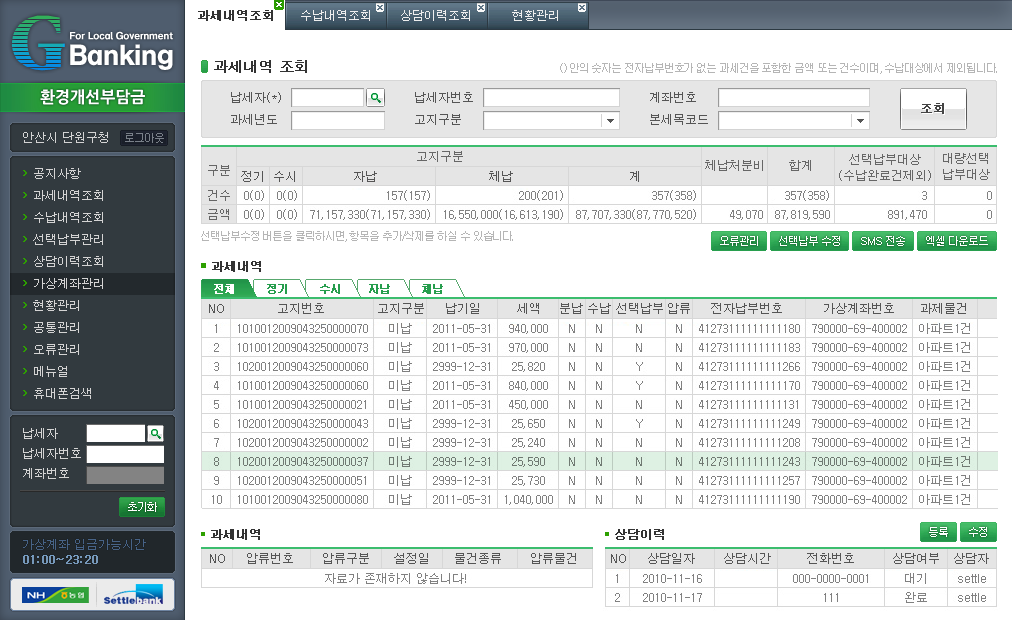
<style>
.page{position:relative;width:1012px;height:620px;background:#ffffff}
.page>*{position:absolute;margin:0}
.t1{font:12px "Dotum";color:#333333;font-weight:bold}
.t2{font:12px "Dotum";color:#eeeeee}
.t3{font:14px "Dotum";color:#333333;font-weight:bold}
.t4{font:11px "Dotum";letter-spacing:-0.1em;color:#b5b5b5}
.t5{font:16px "NanumGothicOTFExtraBold";color:#ffffff}
.t6{font:12px/22px "Dotum";color:#555555;text-transform:uppercase}
.t7{font:12px "Dotum";letter-spacing:-0.1em;color:#444444;font-weight:bold}
.t8{font:12px "Dotum";color:#d4d4d4}
.t9{font:12px "Dotum";color:#666666;text-transform:uppercase}
.t10{font:12px/16px "Dotum";color:#666666;text-transform:uppercase}
.t11{font:12px/22px "Dotum";color:#d5d4d4}
.t12{font:12px "Dotum";color:#555555;text-transform:uppercase}
.t13{font:11px "Dotum";letter-spacing:-0.1em;color:#feffff}
.t14{font:11px "Dotum";letter-spacing:-0.1em;color:#ffffff}
.t15{font:11px "Dotum";letter-spacing:-0.1em;color:#ffffff;font-weight:bold}
.t16{font:11px "Dotum";letter-spacing:-0.1em;color:#269d4d;font-weight:bold}
.t17{font:12px/20px "Dotum";color:#d4d4d4;text-transform:uppercase}
.t18{font:12px/15px "Dotum";text-transform:uppercase}
.t19{font:12px/15px "Dotum";text-transform:uppercase;font-weight:bold}
</style>
<div class="page">
<p class="t1" style="left:198px;top:10px;width:75px;height:11px">과세내역조회</p>
<p class="t2" style="left:301px;top:10px;width:257px;height:11px">수납내역조회       상담이력조회          현황관리</p>
<p class="t3" style="left:214px;top:60px;width:93px;height:13px">과세내역 조회</p>
<p class="t4" style="left:560px;top:63px;width:437px;height:11px">() 안의 숫자는 전자납부번호가 없는 과세건을 포함한 금액 또는 건수이며, 수납대상에서 제외됩니다.</p>
<p class="t5" style="left:40px;top:89px;width:105px;height:16px">환경개선부담금</p>
<p class="t6" style="left:231px;top:92px;width:50px;height:33px">납세자(*)<br>과세년도</p>
<p class="t6" style="left:415px;top:92px;width:58px;height:33px">납세자번호<br>고지구분</p>
<p class="t6" style="left:650px;top:92px;width:58px;height:33px">계좌번호<br>본세목코드</p>
<p class="t7" style="left:921px;top:103px;width:23px;height:11px">조회</p>
<p class="t8" style="left:23px;top:132px;width:85px;height:11px">안산시 단원구청</p>
<p class="t9" style="left:417px;top:151px;width:46px;height:11px">고지구분</p>
<p class="t9" style="left:705px;top:160px;width:106px;height:11px">체납처분비      합계</p>
<p class="t10" style="left:839px;top:154px;width:92px;height:27px;text-align:center">선택납부대상<br>(수납완료건제외)</p>
<p class="t10" style="left:943px;top:153px;width:47px;height:27px">대량선택<br>납부대상</p>
<p class="t11" style="left:33px;top:168px;width:70px;height:231px">공지사항<br>과세내역조회<br>수납내역조회<br>선택납부관리<br>상담이력조회<br>가상계좌관리<br>현황관리<br>공통관리<br>오류관리<br>메뉴얼<br>휴대폰검색</p>
<p class="t9" style="left:208px;top:165px;width:22px;height:11px">구분</p>
<p class="t12" style="left:241px;top:171px;width:398px;height:11px">정기  수시              자납                            체납                             계</p>
<p class="t9" style="left:208px;top:190px;width:22px;height:11px">건수</p>
<p class="t9" style="left:208px;top:209px;width:21px;height:11px">금액</p>
<p class="t4" style="left:201px;top:231px;width:312px;height:11px">선택납부수정 버튼을 클릭하시면, 항목을 추가/삭제를 하실 수 있습니다.</p>
<p class="t13" style="left:720px;top:236px;width:38px;height:10px">오류관리</p>
<p class="t14" style="left:779px;top:236px;width:61px;height:10px">선택납부 수정</p>
<p class="t14" style="left:861px;top:236px;width:44px;height:10px">SMS 전송</p>
<p class="t14" style="left:926px;top:236px;width:62px;height:10px">엑셀 다운로드</p>
<p class="t1" style="left:212px;top:261px;width:49px;height:11px">과세내역</p>
<p class="t15" style="left:214px;top:284px;width:20px;height:10px">전체</p>
<p class="t16" style="left:267px;top:284px;width:176px;height:10px">정기        수시       자납        체납</p>
<p class="t12" style="left:209px;top:303px;width:757px;height:11px">NO             고지번호             고지구분     납기일         세액     분납 수납  선택납부 압류     전자납부번호          가상계좌번호      과제물건</p>
<p class="t17" style="left:23px;top:428px;width:58px;height:51px">납세자<br>납세자번호<br>계좌번호</p>
<p class="t14" style="left:128px;top:502px;width:29px;height:10px">초기화</p>
<p class="t1" style="left:211px;top:529px;width:49px;height:11px">과세내역</p>
<p class="t1" style="left:615px;top:529px;width:49px;height:11px">상담이력</p>
<p class="t13" style="left:929px;top:527px;width:19px;height:10px">등록</p>
<p class="t13" style="left:969px;top:527px;width:18px;height:10px">수정</p>
<p class="t18" style="left:23px;top:539px;width:123px;height:25px">가상계좌 입금가능시간<br><span class="t19">01:00~23:20</span></p>
<p class="t12" style="left:210px;top:553px;width:366px;height:11px">NO     압류번호       압류구분      설정일      물건종류       압류물건</p>
<p class="t12" style="left:611px;top:553px;width:378px;height:11px">NO     상담일자       상담시간         전화번호         상담여부   상담자</p>
</div>
